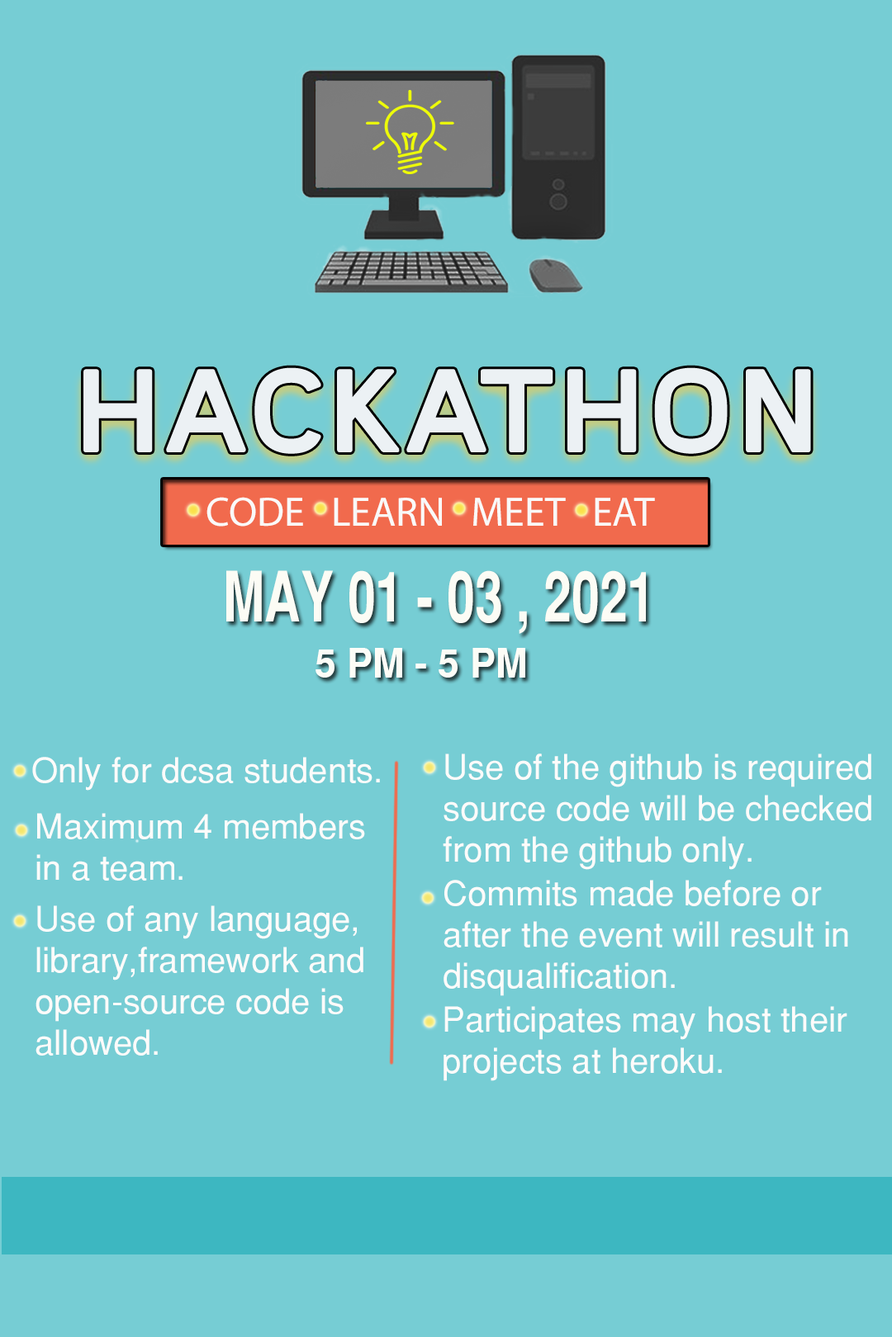
<style>
.page{position:relative;width:892px;height:1337px;background:#76cdd4}
.page>*{position:absolute;margin:0}
.t1{font:133.6px "SimvoniBold";color:#ecf1f4;scale:1.03 1}
.t2{font:41.3px "MyriadPro-Regular";color:#ecf1f4}
.t3{font:69.7px "SansSerifBold";color:#fcfcf5;scale:0.71 1}
.t4{font:38.9px "SansSerifBold";color:#fcfcf5}
.t5{font:34.4px "SansSerif";color:#fdfbfa}
</style>
<div class="page">
<p class="t1" style="left:83px;top:367px;width:728px;height:87px">HACKATHON</p>
<p class="t2" style="left:206px;top:497px;width:449px;height:30px">CODE   LEARN   MEET   EAT</p>
<p class="t3" style="left:226px;top:570px;width:420px;height:64px">MAY 01 - 03 , 2021</p>
<p class="t4" style="left:315px;top:648px;width:210px;height:30px">5 PM - 5 PM</p>
<p class="t5" style="left:32px;top:757px;width:348px;height:34px">Only for dcsa students.</p>
<p class="t5" style="left:442px;top:754px;width:429px;height:116px">Use of the github is required<br>source code will be checked<br>from the github only.</p>
<p class="t5" style="left:36px;top:813px;width:329px;height:68px">Maximum 4 members <br>in a team.</p>
<p class="t5" style="left:443px;top:880px;width:405px;height:116px">Commits made before or <br>after the event will result in<br>disqualification.</p>
<p class="t5" style="left:35px;top:906px;width:328px;height:150px">Use of any language, <br>library,framework and<br>open-source code is<br>allowed.</p>
<p class="t5" style="left:443px;top:1006px;width:404px;height:75px">Participates may host their<br>projects at heroku.</p>
</div>
